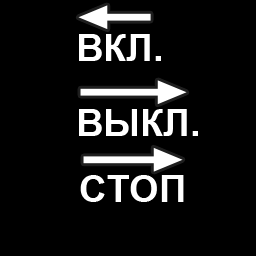
<style>
.page{position:relative;width:256px;height:256px;background:#000000}
.page>*{position:absolute;margin:0}
.t1{font:38px "Arial-BoldMT";color:#ffffff}
</style>
<div class="page">
<p class="t1" style="left:79px;top:34px;width:82px;height:27px">ВКЛ.</p>
<p class="t1" style="left:79px;top:109px;width:119px;height:27px">ВЫКЛ.</p>
<p class="t1" style="left:80px;top:175px;width:104px;height:27px">СТОП</p>
</div>
